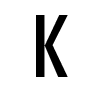
<style>
.page{position:relative;width:100px;height:100px;background:#ffffff}
.page>*{position:absolute;margin:0}
.t1{font:100px "TwCenMT-Condensed";color:#000000}
</style>
<div class="page">
<p class="t1" style="left:36px;top:15px;width:32px;height:62px">K</p>
</div>
